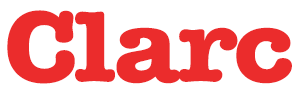
<style>
.page{position:relative;width:300px;height:92px;background:#ffffff}
.page>*{position:absolute;margin:0}
.t1{font:103.5px "AmericanTypewriter-Bold";letter-spacing:-0.025em;color:#eb2c2c;scale:1.11 1}
</style>
<div class="page">
<p class="t1" style="left:7px;top:10px;width:285px;height:74px">Clarc</p>
</div>
